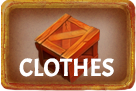
<style>
.page{position:relative;width:136px;height:91px}
.page>*{position:absolute;margin:0}
.t1{font:25px "Acme-Regular";color:#ffffff}
</style>
<div class="page">
<p class="t1" style="left:19px;top:58px;width:95px;height:19px">CLOTHES</p>
</div>
